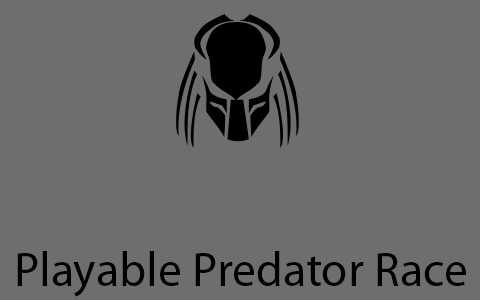
<style>
.page{position:relative;width:480px;height:300px;background:#6e6e6e}
.page>*{position:absolute;margin:0}
.t1{font:48px "MyriadPro-Regular";color:#000000}
</style>
<div class="page">
<p class="t1" style="left:17px;top:251px;width:449px;height:46px">Playable Predator Race</p>
</div>
